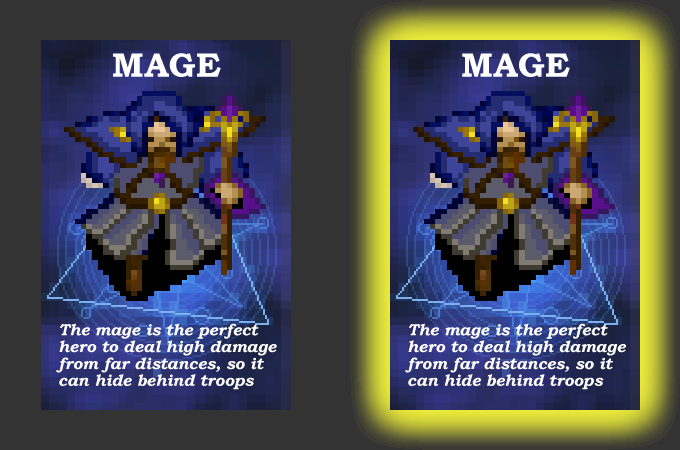
<style>
.page{position:relative;width:680px;height:450px;background:#333333}
.page>*{position:absolute;margin:0}
.t1{font:34.3px "BookmanOldStyle-Bold";color:#fefefe}
.t2{font:16px "BookmanOldStyle-BoldItalic";color:#ffffff}
</style>
<div class="page">
<p class="t1" style="left:113px;top:53px;width:108px;height:24px">MAGE</p>
<p class="t1" style="left:462px;top:53px;width:108px;height:24px">MAGE</p>
<p class="t2" style="left:56px;top:323px;width:221px;height:67px">The mage is the perfect<br>hero to deal high damage<br>from far distances, so it<br>can hide behind troops</p>
<p class="t2" style="left:405px;top:323px;width:221px;height:67px">The mage is the perfect<br>hero to deal high damage<br>from far distances, so it<br>can hide behind troops</p>
</div>
